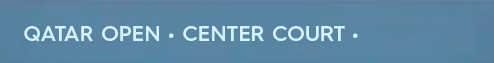
<style>
.page{position:relative;width:494px;height:63px}
.page>*{position:absolute;margin:0}
.t1{font:21.5px "HurmeGeometricSans4-SemiBold";color:#d3f3fd}
</style>
<div class="page">
<p class="t1" style="left:24px;top:26px;width:135px;height:16px">QATAR OPEN</p>
<p class="t1" style="left:169px;top:26px;width:189px;height:15px">• CENTER COURT •</p>
</div>
